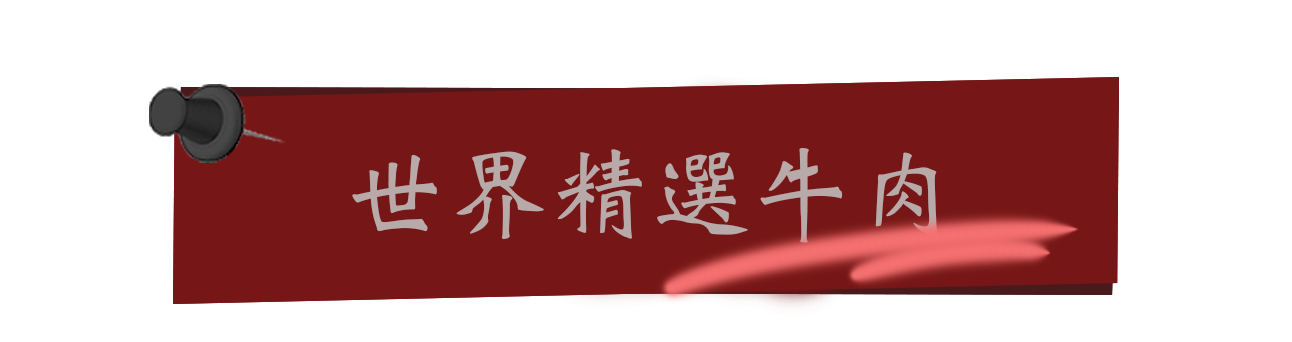
<style>
.page{position:relative;width:1292px;height:342px;background:#ffffff}
.page>*{position:absolute;margin:0}
.t1{font:102px "WeibeiTC-Bold";color:#b9aaaa}
</style>
<div class="page">
<p class="t1" style="left:352px;top:148px;width:586px;height:95px">世界精選牛肉</p>
</div>
